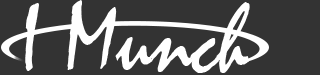
<style>
.page{position:relative;width:320px;height:75px;background:#333333}
.page>*{position:absolute;margin:0}
.t1{font:99.5px "Mistral";color:#ffffff;scale:0.87 1}
</style>
<div class="page">
<p class="t1" style="left:25px;top:0px;width:225px;height:73px">I Munch</p>
</div>
